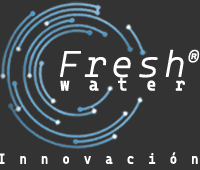
<style>
.page{position:relative;width:200px;height:170px;background:#333333}
.page>*{position:absolute;margin:0}
.t1{font:35.9px "CascadiaCode-ExtraLight";letter-spacing:0.14em;color:#ffffff;font-weight:bold;font-style:italic}
.t2{font:17.9px "CascadiaCode-ExtraLight";letter-spacing:0.14em;color:#ffffff;font-weight:bold;font-style:italic}
.t3{font:17.9px "CascadiaMonoPL-Regular";letter-spacing:1.18em;color:#ffffff;font-weight:bold;scale:0.9 1}
.t4{font:14px "CascadiaMonoPL-Regular";letter-spacing:1.18em;color:#ffffff;font-weight:bold;scale:0.85 1}
</style>
<div class="page">
<p class="t1" style="left:60px;top:49px;width:124px;height:29px">Fresh</p>
<p class="t2" style="left:188px;top:49px;width:12px;height:14px">®</p>
<p class="t3" style="left:60px;top:77px;width:125px;height:14px">water</p>
<p class="t4" style="left:0px;top:152px;width:198px;height:12px">Innovación</p>
</div>
